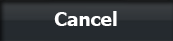
<style>
.page{position:relative;width:173px;height:41px;background:#252a2f}
.page>*{position:absolute;margin:0}
.t1{font:19px "Tahoma-Bold";color:#ffffff}
</style>
<div class="page">
<p class="t1" style="left:54px;top:11px;width:63px;height:15px">Cancel</p>
</div>
